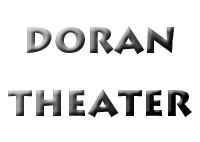
<style>
.page{position:relative;width:200px;height:142px;background:#ffffff}
.page>*{position:absolute;margin:0}
.t1{font:36px "LithosPro-Black"}
</style>
<div class="page">
<p class="t1" style="left:8px;top:26px;width:184px;height:92px;text-align:center">DORAN<br>THEATER</p>
</div>
